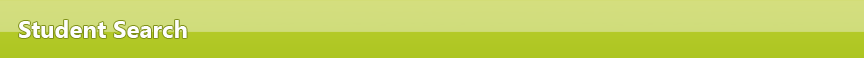
<style>
.page{position:relative;width:864px;height:58px}
.page>*{position:absolute;margin:0}
.t1{font:24px "SegoeUI-Bold";color:#fefefe}
</style>
<div class="page">
<p class="t1" style="left:19px;top:20px;width:168px;height:18px">Student Search</p>
</div>
